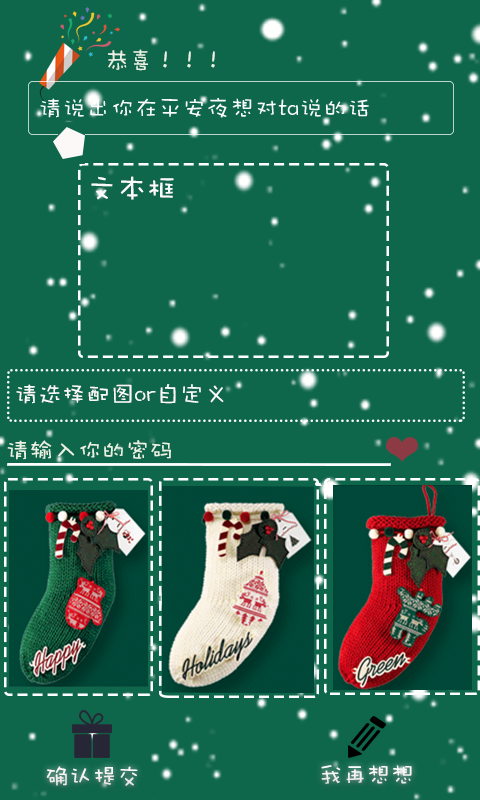
<style>
.page{position:relative;width:480px;height:800px;background:#0f674b}
.page>*{position:absolute;margin:0}
.t1{font:24px "DFWaWaSC-W5";color:#e7f2e5}
.t2{font:30px "DFWaWaSC-W5";color:#f9fafa}
.t3{font:24px "DFWaWaSC-W5";color:#f9fbfa}
</style>
<div class="page">
<p class="t1" style="left:108px;top:49px;width:107px;height:22px">恭喜！！！</p>
<p class="t2" style="left:91px;top:176px;width:83px;height:24px">文本框</p>
<p class="t3" style="left:16px;top:384px;width:208px;height:20px">请选择配图or自定义</p>
<p class="t1" style="left:7px;top:440px;width:164px;height:20px">请输入你的密码</p>
<p class="t3" style="left:46px;top:766px;width:92px;height:20px">确认提交</p>
<p class="t3" style="left:321px;top:765px;width:91px;height:19px">我再想想</p>
</div>
